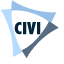
<style>
.page{position:relative;width:64px;height:64px;background:#ffffff}
.page>*{position:absolute;margin:0}
.t1{font:16px "Futura-CondensedExtraBold";color:#02253b}
</style>
<div class="page">
<p class="t1" style="left:14px;top:22px;width:27px;height:13px">CIVI</p>
</div>
